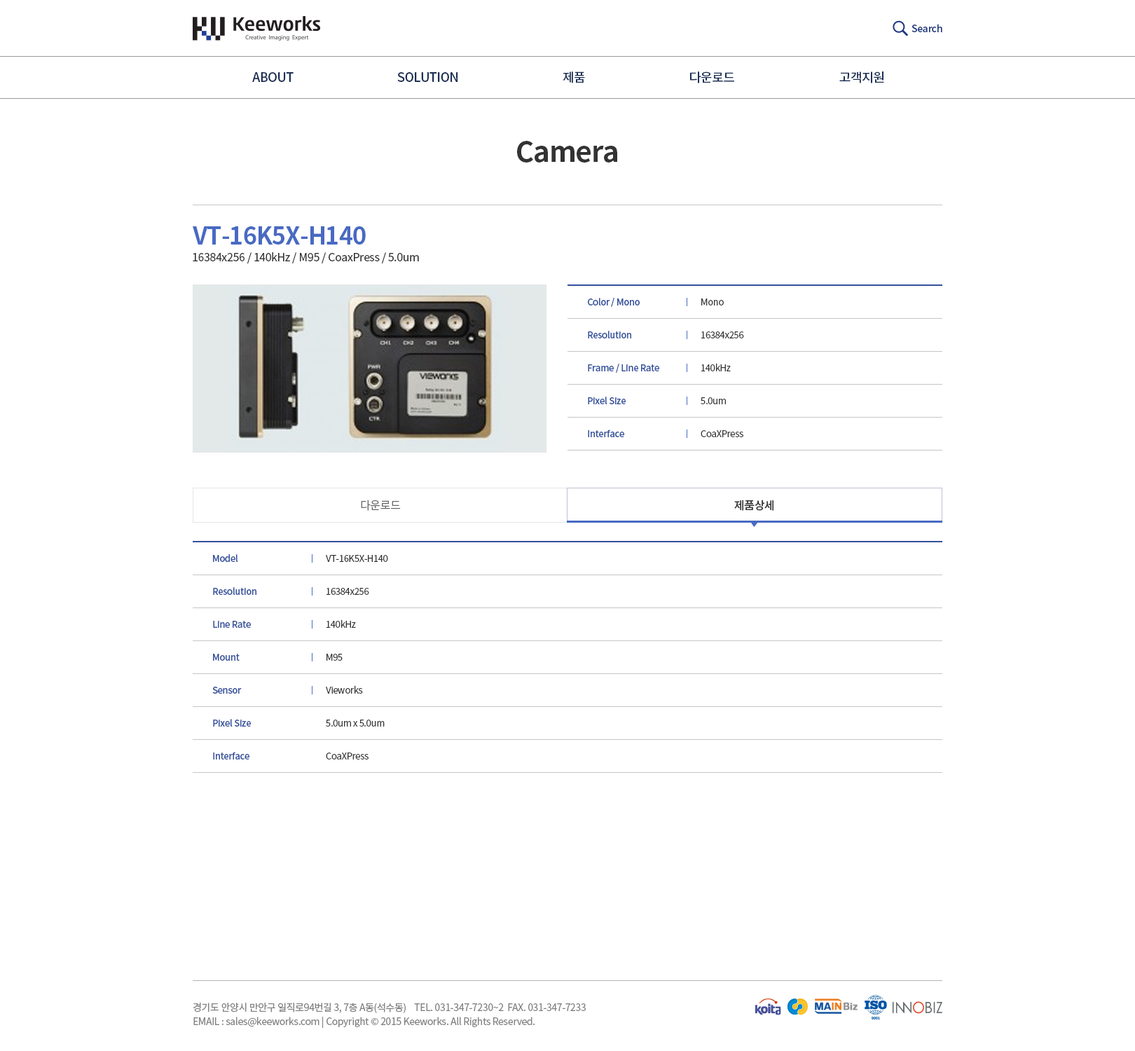
<style>
.page{position:relative;width:1135px;height:1051px;background:#ffffff}
.page>*{position:absolute;margin:0}
.t1{font:9.8px "NotoSansCJKkr-Medium";letter-spacing:-0.025em;color:#1b3780}
.t2{font:12.6px "NotoSansCJKkr-Medium";letter-spacing:-0.025em;color:#1c3053;text-transform:uppercase}
.t3{font:28px "NotoSansCJKkr-Bold";letter-spacing:-0.025em;color:#333333}
.t4{font:23.8px "NotoSansCJKkr-Bold";letter-spacing:-0.025em;color:#486ac2}
.t5{font:11.2px "NotoSansCJKkr-Regular";letter-spacing:-0.025em;color:#333333}
.t6{font:9.1px/32.9px "NotoSansCJKkr-Medium";letter-spacing:-0.025em;color:#33509c}
.t7{font:9.1px/32.9px "NotoSansCJKkr-Regular";letter-spacing:-0.025em;color:#333333}
.t8{font:11.2px "NotoSansCJKkr-DemiLight";letter-spacing:-0.025em;color:#666666}
.t9{font:11.2px "NotoSansCJKkr-Medium";letter-spacing:-0.025em;color:#333333}
.t10{font:9.8px/14px "NotoSansCJKkr-Regular";letter-spacing:-0.025em;color:#808080}
</style>
<div class="page">
<p class="t1" style="left:911px;top:24px;width:31px;height:8px">Search</p>
<p class="t2" style="left:252px;top:72px;width:42px;height:10px">ABOUT</p>
<p class="t2" style="left:397px;top:72px;width:61px;height:10px">SOLUTION</p>
<p class="t2" style="left:563px;top:71px;width:22px;height:12px">제품</p>
<p class="t2" style="left:690px;top:71px;width:44px;height:12px">다운로드</p>
<p class="t2" style="left:839px;top:71px;width:45px;height:12px">고객지원</p>
<p class="t3" style="left:517px;top:141px;width:100px;height:22px">Camera</p>
<p class="t4" style="left:193px;top:226px;width:173px;height:18px">VT-16K5X-H140</p>
<p class="t5" style="left:193px;top:252px;width:226px;height:11px">16384x256 / 140kHz / M95 / CoaxPress / 5.0um</p>
<p class="t6" style="left:588px;top:298px;width:71px;height:139px">Color / Mono<br>Resolution<br>Frame / Line Rate<br>Pixel Size<br>Interface</p>
<p class="t7" style="left:701px;top:298px;width:43px;height:139px">Mono<br>16384x256<br>140kHz<br>5.0um<br>CoaXPress</p>
<p class="t8" style="left:361px;top:499px;width:40px;height:12px">다운로드</p>
<p class="t9" style="left:734px;top:499px;width:39px;height:12px">제품상세</p>
<p class="t6" style="left:212px;top:554px;width:44px;height:205px">Model<br>Resolution<br>Line Rate<br>Mount<br>Sensor<br>Pixel Size<br>Interface</p>
<p class="t7" style="left:326px;top:555px;width:62px;height:204px">VT-16K5X-H140<br>16384x256<br>140kHz<br>M95<br>Vieworks<br>5.0um x 5.0um<br>CoaXPress</p>
<p class="t10" style="left:193px;top:1002px;width:393px;height:26px">경기도 안양시 만안구 일직로94번길 3, 7층 A동(석수동)    TEL. 031-347-7230~2  FAX. 031-347-7233<br>EMAIL : sales@keeworks.com | Copyright © 2015 Keeworks. All Rights Reserved.</p>
</div>
